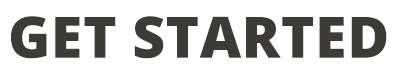
<style>
.page{position:relative;width:400px;height:74px;background:#ffffff}
.page>*{position:absolute;margin:0}
.t1{font:57.3px "OpenSans-ExtraBold";letter-spacing:0.01em;color:#3c3b38;text-transform:uppercase}
</style>
<div class="page">
<p class="t1" style="left:11px;top:16px;width:376px;height:43px">Get started</p>
</div>
